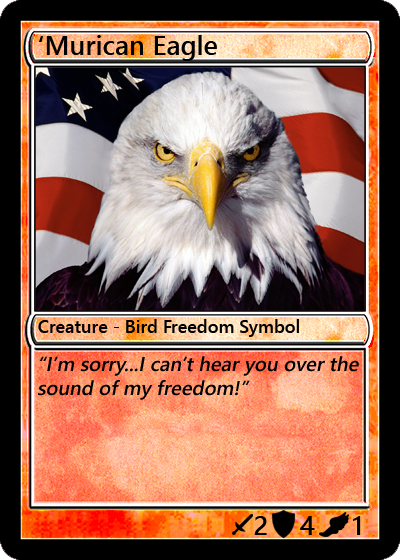
<style>
.page{position:relative;width:400px;height:560px}
.page>*{position:absolute;margin:0}
.t1{font:27px "YuGothicUI-Semibold";color:#000000}
.t2{font:18px "YuGothicUI-Semibold";color:#000000}
.t3{font:20px "YuGothicUI-Semibold";color:#000000;font-style:italic}
</style>
<div class="page">
<p class="t1" style="left:38px;top:35px;width:179px;height:26px">‘Murican Eagle</p>
<p class="t2" style="left:38px;top:319px;width:261px;height:18px">Creature - Bird Freedom Symbol</p>
<p class="t3" style="left:38px;top:356px;width:321px;height:44px">“I’m sorry...I can’t hear you over the sound of my freedom!”</p>
<p class="t1" style="left:254px;top:516px;width:13px;height:19px">2</p>
<p class="t1" style="left:300px;top:516px;width:15px;height:19px">4</p>
<p class="t1" style="left:353px;top:516px;width:8px;height:19px">1</p>
</div>
